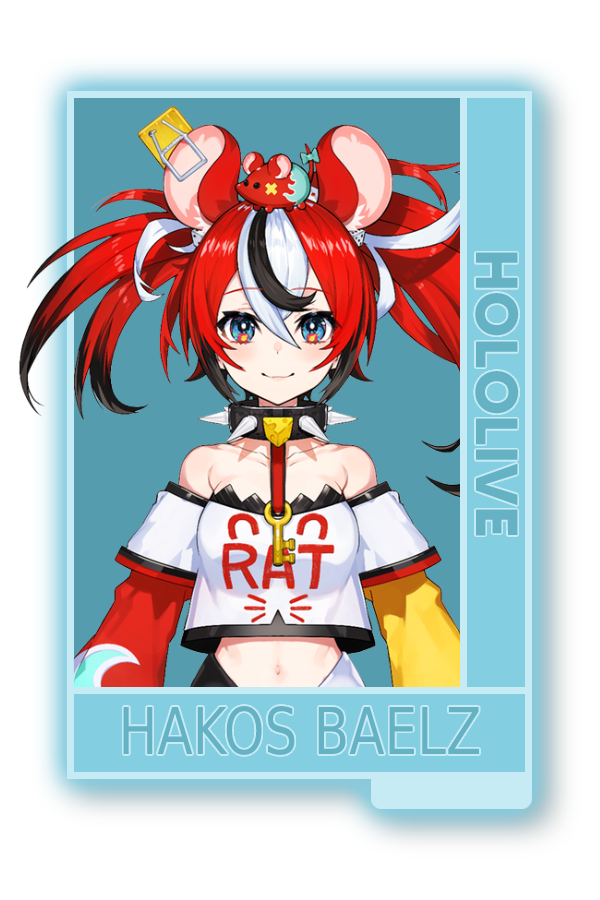
<style>
.page{position:relative;width:600px;height:900px}
.page>*{position:absolute;margin:0}
.t1{font:59.2px "MADETOMMY-Bold";color:#66b2c5}
.t2{font:64.6px "CoolveticaRg-Regular";color:#66b2c5;scale:0.8 1}
</style>
<div class="page">
<p class="t1" style="left:475px;top:252px;width:44px;height:284px;rotate:90deg">HOLOLIVE</p>
<p class="t2" style="left:123px;top:706px;width:357px;height:49px">HAKOS BAELZ</p>
</div>
